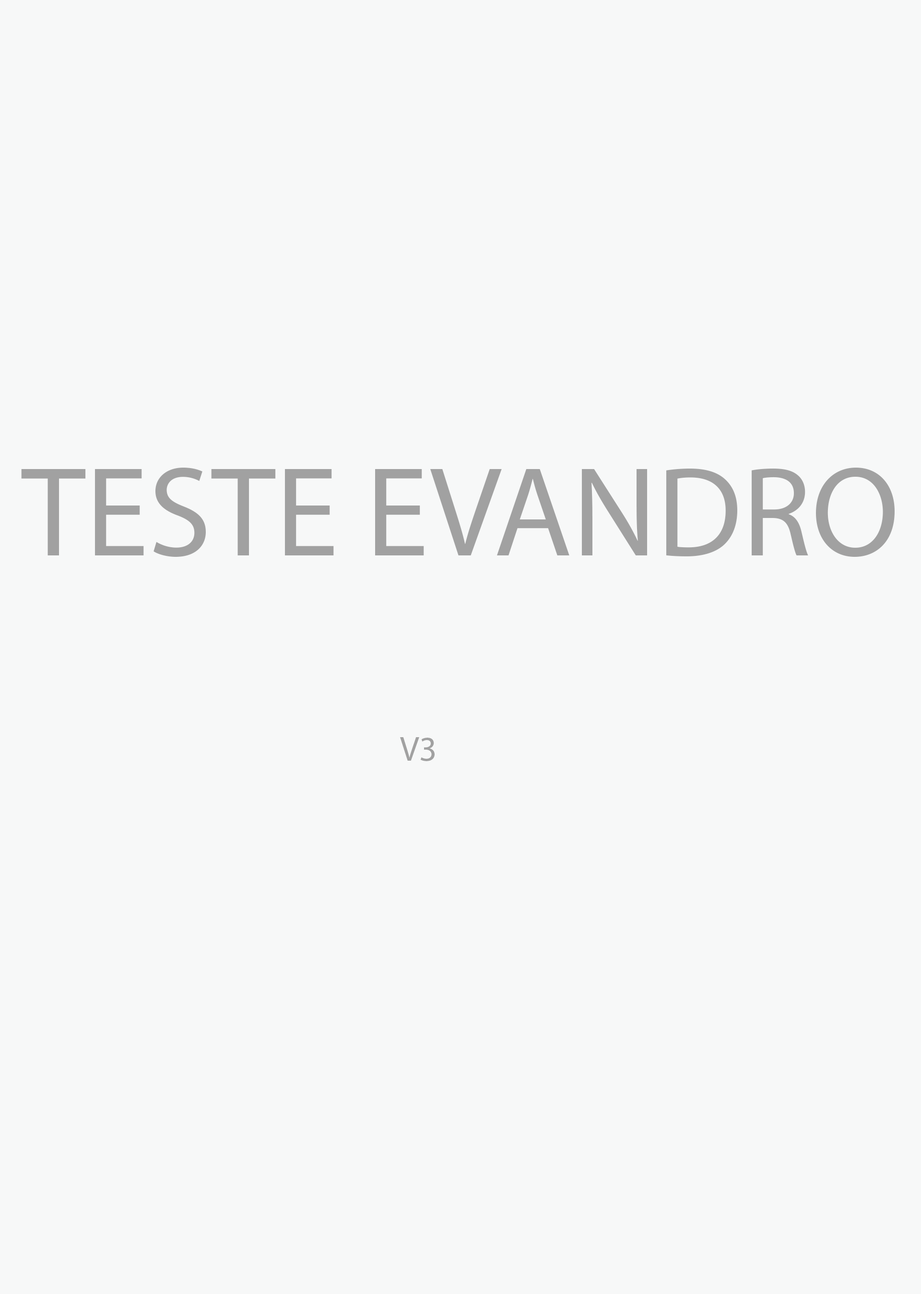
<style>
.page{position:relative;width:921px;height:1294px;background:#f7f8f8}
.page>*{position:absolute;margin:0}
.t1{font:128.2px "MyriadPro-Regular";color:#a1a1a1}
.t2{font:34.5px "MyriadPro-Regular";color:#a1a1a1}
</style>
<div class="page">
<p class="t1" style="left:21px;top:467px;width:874px;height:90px">TESTE EVANDRO</p>
<p class="t2" style="left:400px;top:737px;width:35px;height:24px">V3</p>
</div>
